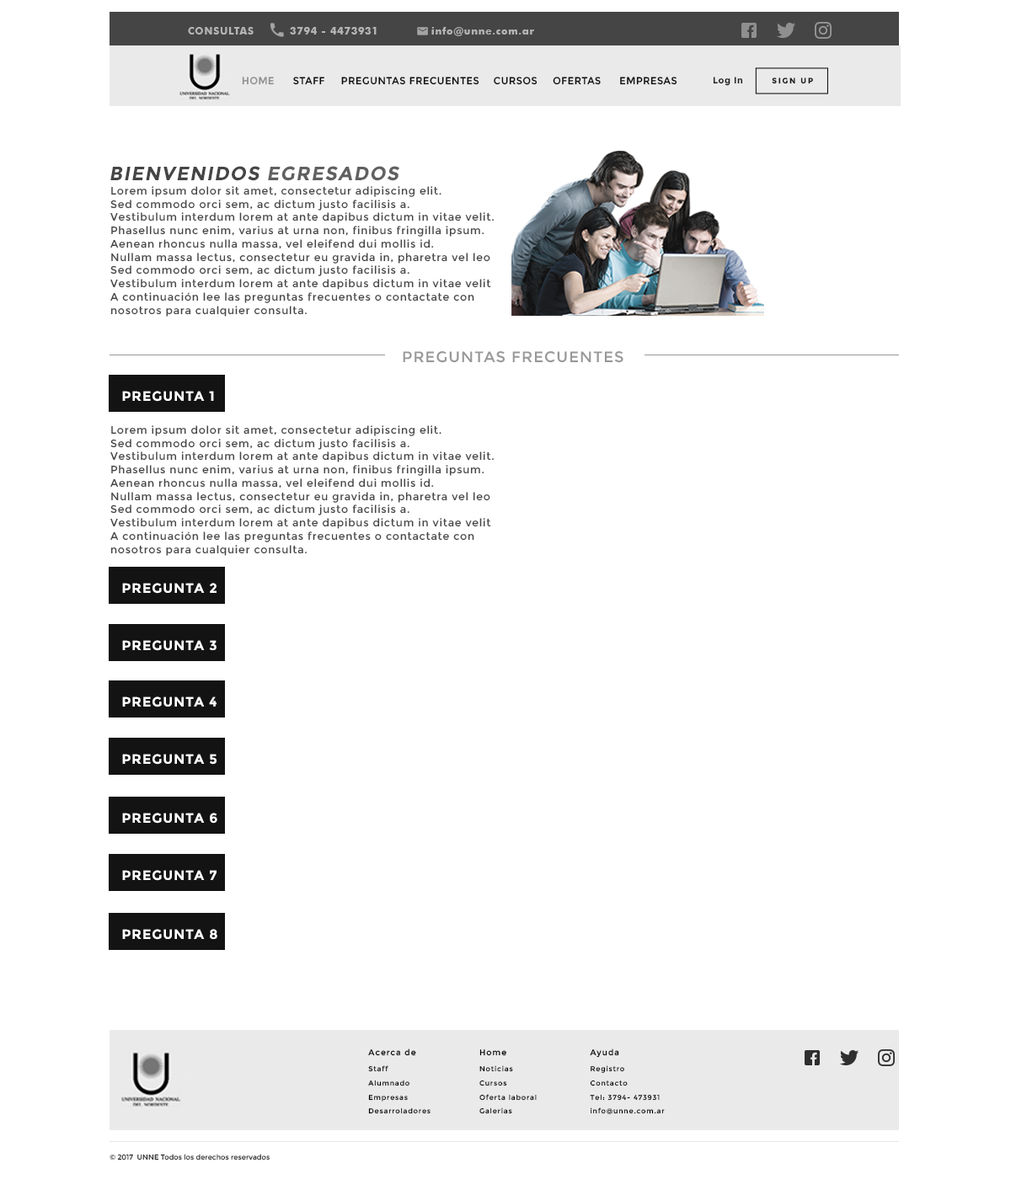
<style>
.page{position:relative;width:1011px;height:1179px;background:#ffffff}
.page>*{position:absolute;margin:0}
.t1{font:10.1px "FuturaBT-Bold";letter-spacing:0.06em;color:#b4b4b4}
.t2{font:10.1px "Montserrat-Regular";letter-spacing:0.06em;color:#8f8e8e;text-transform:uppercase;scale:0.93 1}
.t3{font:10.1px "Montserrat-Regular";letter-spacing:0.06em;color:#0a0a0a;text-transform:uppercase;scale:0.93 1}
.t4{font:9.1px "Montserrat-Bold";letter-spacing:0.06em;color:#1f1d1d}
.t5{font:7.8px "Montserrat-Bold";letter-spacing:0.2em;color:#191717;scale:0.97 1}
.t6{font:19.4px "Montserrat-Bold";letter-spacing:0.06em;color:#454545;font-style:italic}
.t7{font:19.4px "Montserrat-Bold";letter-spacing:0.06em;color:#606060;font-style:italic}
.t8{font:10.6px/13.3px "Montserrat-Regular";letter-spacing:0.06em;color:#454545}
.t9{font:15.2px "Montserrat-Regular";letter-spacing:0.06em;color:#989898;text-transform:uppercase}
.t10{font:13.5px "Montserrat-Bold";letter-spacing:0.06em;color:#ffffff;text-transform:uppercase}
.t11{font:8.2px "Montserrat-Regular";letter-spacing:0.1em;color:#000000}
.t12{font:7px/14px "Montserrat-Regular";letter-spacing:0.1em;color:#000000}
.t13{font:7px/17.5px "Montserrat-Regular";letter-spacing:0.1em;color:#000000}
.t14{font:7.1px "Montserrat-Regular";color:#282828}
</style>
<div class="page">
<p class="t1" style="left:188px;top:27px;width:66px;height:8px">CONSULTAS</p>
<p class="t1" style="left:290px;top:27px;width:87px;height:8px">3794 - 4473931</p>
<p class="t1" style="left:431px;top:27px;width:103px;height:9px">info@unne.com.ar</p>
<p class="t2" style="left:242px;top:77px;width:32px;height:8px">Home</p>
<p class="t3" style="left:293px;top:77px;width:31px;height:8px">Staff</p>
<p class="t3" style="left:341px;top:77px;width:138px;height:8px">Preguntas frecuentes</p>
<p class="t3" style="left:494px;top:77px;width:44px;height:8px">cursos</p>
<p class="t3" style="left:553px;top:77px;width:48px;height:8px">ofertas</p>
<p class="t3" style="left:620px;top:77px;width:57px;height:8px">empresas</p>
<p class="t4" style="left:713px;top:77px;width:30px;height:9px">Log In</p>
<p class="t5" style="left:772px;top:78px;width:41px;height:6px">SIGN UP</p>
<p class="t6" style="left:110px;top:166px;width:290px;height:15px">BIENVENIDOS <span class="t7">EGRESADOS</span></p>
<p class="t8" style="left:110px;top:186px;width:384px;height:131px">Lorem ipsum dolor sit amet, consectetur adipiscing elit. <br>Sed commodo orci sem, ac dictum justo facilisis a. <br>Vestibulum interdum lorem at ante dapibus dictum in vitae velit. <br>Phasellus nunc enim, varius at urna non, finibus fringilla ipsum. <br>Aenean rhoncus nulla massa, vel eleifend dui mollis id. <br>Nullam massa lectus, consectetur eu gravida in, pharetra vel leo<br>Sed commodo orci sem, ac dictum justo facilisis a. <br>Vestibulum interdum lorem at ante dapibus dictum in vitae velit<br>A continuación lee las preguntas frecuentes o contactate con <br>nosotros para cualquier consulta.</p>
<p class="t9" style="left:403px;top:351px;width:220px;height:12px">preguntas frecuentes</p>
<p class="t10" style="left:122px;top:391px;width:92px;height:11px">PREGUNTA 1</p>
<p class="t8" style="left:110px;top:425px;width:384px;height:131px">Lorem ipsum dolor sit amet, consectetur adipiscing elit. <br>Sed commodo orci sem, ac dictum justo facilisis a. <br>Vestibulum interdum lorem at ante dapibus dictum in vitae velit. <br>Phasellus nunc enim, varius at urna non, finibus fringilla ipsum. <br>Aenean rhoncus nulla massa, vel eleifend dui mollis id. <br>Nullam massa lectus, consectetur eu gravida in, pharetra vel leo<br>Sed commodo orci sem, ac dictum justo facilisis a. <br>Vestibulum interdum lorem at ante dapibus dictum in vitae velit<br>A continuación lee las preguntas frecuentes o contactate con <br>nosotros para cualquier consulta.</p>
<p class="t10" style="left:122px;top:583px;width:95px;height:11px">PREGUNTA 2</p>
<p class="t10" style="left:122px;top:640px;width:95px;height:11px">PREGUNTA 3</p>
<p class="t10" style="left:122px;top:697px;width:95px;height:11px">PREGUNTA 4</p>
<p class="t10" style="left:122px;top:754px;width:95px;height:11px">PREGUNTA 5</p>
<p class="t10" style="left:122px;top:813px;width:95px;height:11px">PREGUNTA 6</p>
<p class="t10" style="left:122px;top:870px;width:95px;height:11px">PREGUNTA 7</p>
<p class="t10" style="left:122px;top:929px;width:95px;height:11px">PREGUNTA 8</p>
<p class="t11" style="left:368px;top:1049px;width:48px;height:7px">Acerca de</p>
<p class="t11" style="left:479px;top:1050px;width:27px;height:6px">Home</p>
<p class="t11" style="left:590px;top:1049px;width:29px;height:9px">Ayuda</p>
<p class="t12" style="left:368px;top:1066px;width:63px;height:49px"><span class="t13">Staff<br></span>Alumnado<br>Empresas<br>Desarroladores</p>
<p class="t12" style="left:479px;top:1066px;width:58px;height:49px"><span class="t13">Noticias<br></span>Cursos<br>Oferta laboral<br>Galerias</p>
<p class="t12" style="left:590px;top:1066px;width:75px;height:49px"><span class="t13">Registro<br></span>Contacto<br>Tel: 3794- 473931<br>info@unne.com.ar</p>
<p class="t14" style="left:110px;top:1154px;width:160px;height:7px">© 2017  UNNE Todos los derechos reservados</p>
</div>
